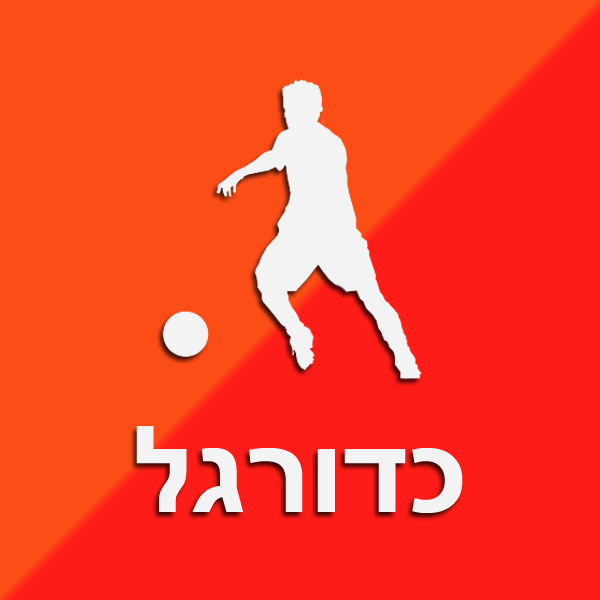
<style>
.page{position:relative;width:600px;height:600px;background:#fd4d17}
.page>*{position:absolute;margin:0}
.t1{font:120px "Arial-BoldMT";color:#f3f3f3}
</style>
<div class="page">
<p class="t1" style="left:136px;top:426px;width:327px;height:87px">לגרודכ</p>
</div>
